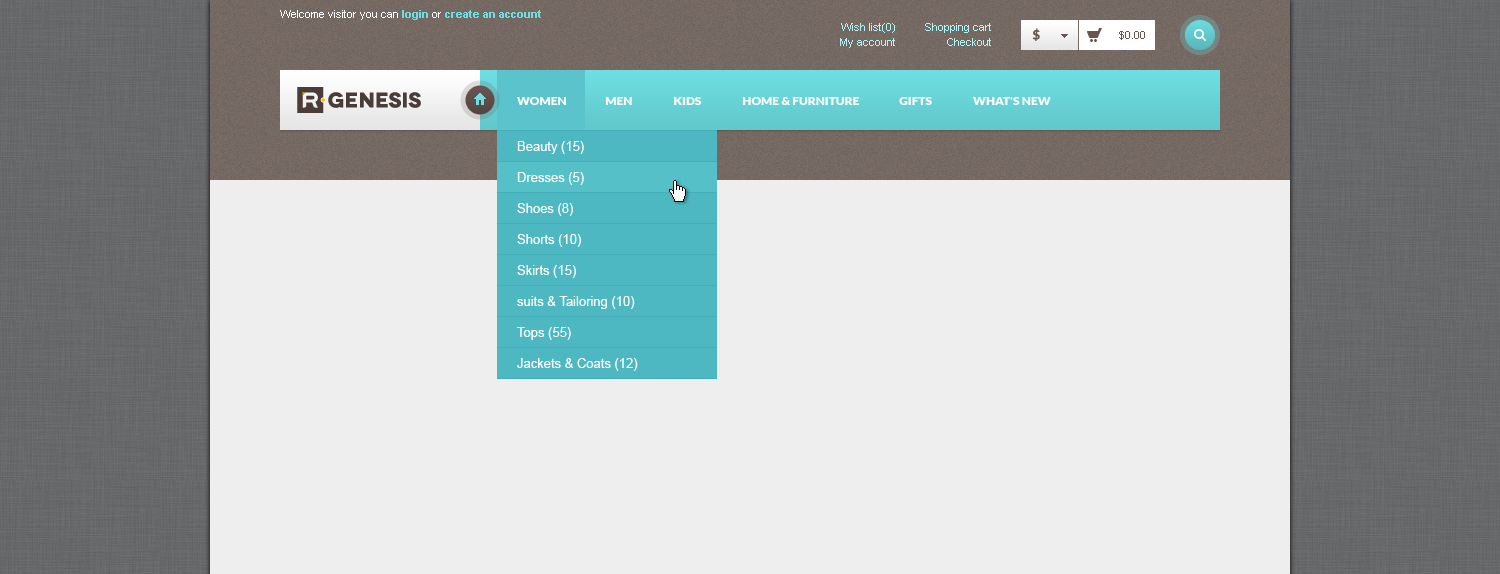
<style>
.page{position:relative;width:1500px;height:574px;background:#eeeeee}
.page>*{position:absolute;margin:0}
.t1{font:11px "ArialMT";color:#ffffff}
.t2{font:11px "Arial-BoldMT";color:#6ddee2}
.t3{font:11px/15px "ArialMT";color:#aff4f7}
.t4{font:13px "Lato-Black";color:#685551}
.t5{font:11px "ArialMT";color:#685551}
.t6{font:12px "Lato-Black";color:#ffffff;text-transform:uppercase}
.t7{font:13px/31px "ArialMT";color:#ffffff}
</style>
<div class="page">
<p class="t1" style="left:280px;top:10px;width:261px;height:10px">Welcome visitor you can <span class="t2">login</span> or <span class="t2">create an account</span></p>
<p class="t3" style="left:840px;top:23px;width:55px;height:25px;text-align:right">Wish list(0)<br>My account</p>
<p class="t3" style="left:925px;top:23px;width:66px;height:23px;text-align:right">Shopping cart<br>Checkout</p>
<p class="t4" style="left:1032px;top:28px;width:8px;height:13px">$</p>
<p class="t5" style="left:1119px;top:31px;width:26px;height:9px">$0.00</p>
<p class="t6" style="left:517px;top:97px;width:534px;height:8px">Women                Men                 Kids                 Home &amp; Furniture                Gifts                 What's New</p>
<p class="t7" style="left:517px;top:141px;width:121px;height:230px">Beauty (15)<br>Dresses (5)<br>Shoes (8)<br>Shorts (10)<br>Skirts (15)<br>suits &amp; Tailoring (10)<br>Tops (55)<br>Jackets &amp; Coats (12)</p>
</div>
